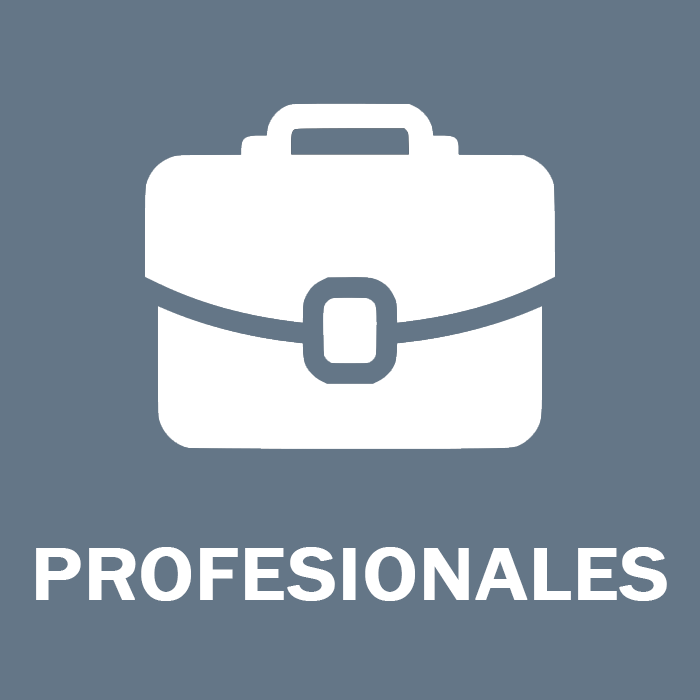
<style>
.page{position:relative;width:700px;height:700px;background:#647687}
.page>*{position:absolute;margin:0}
.t1{font:77px "FranklinGothic-Medium";color:#ffffff;font-weight:bold;scale:1.09 1}
</style>
<div class="page">
<p class="t1" style="left:36px;top:547px;width:631px;height:54px">PROFESIONALES</p>
</div>
